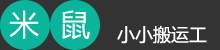
<style>
.page{position:relative;width:220px;height:50px;background:#333333}
.page>*{position:absolute;margin:0}
.t1{font:30px "MicrosoftYaHei";color:#ffffff}
.t2{font:18px "MicrosoftYaHei";color:#ffffff}
</style>
<div class="page">
<p class="t1" style="left:9px;top:10px;width:30px;height:29px">米</p>
<p class="t1" style="left:62px;top:10px;width:28px;height:30px">鼠</p>
<p class="t2" style="left:117px;top:25px;width:90px;height:19px">小小搬运工</p>
</div>
